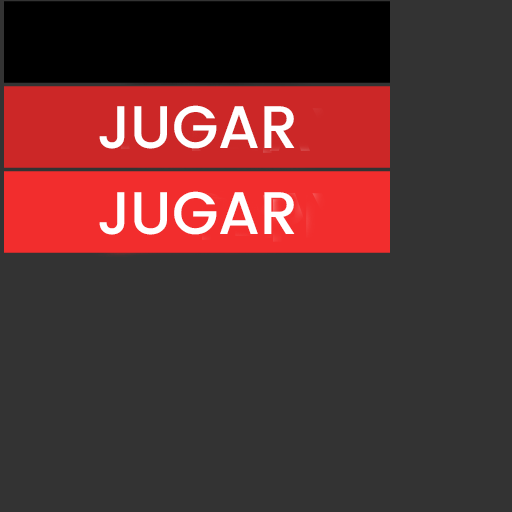
<style>
.page{position:relative;width:512px;height:512px;background:#333333}
.page>*{position:absolute;margin:0}
.t1{font:60px "Poppins-Medium";color:#ffffff}
</style>
<div class="page">
<p class="t1" style="left:99px;top:105px;width:196px;height:44px">JUGAR</p>
<p class="t1" style="left:99px;top:191px;width:196px;height:44px">JUGAR</p>
</div>
